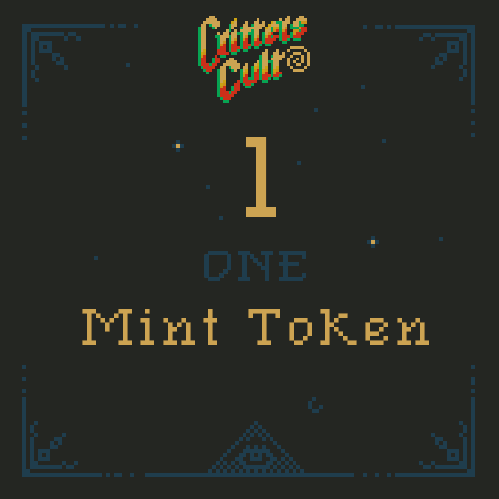
<style>
.page{position:relative;width:499px;height:499px;background:#242622}
.page>*{position:absolute;margin:0}
.t1{font:72px/64px "KingsQuest6";color:#cca352}
.t2{font:48px/48px "BetterPixels";color:#cca352}
.t3{font:160px/64px "KingsQuest6";color:#cca352}
.t4{font:60px/64px "KingsQuest6";color:#cca352}
</style>
<div class="page">
<p class="t1" style="left:82px;top:137px;width:347px;height:208px;text-align:center"><span class="t2"><br><br><br></span><span class="t3">1<br></span><span class="t4">ONE<br></span>Mint Token</p>
</div>
